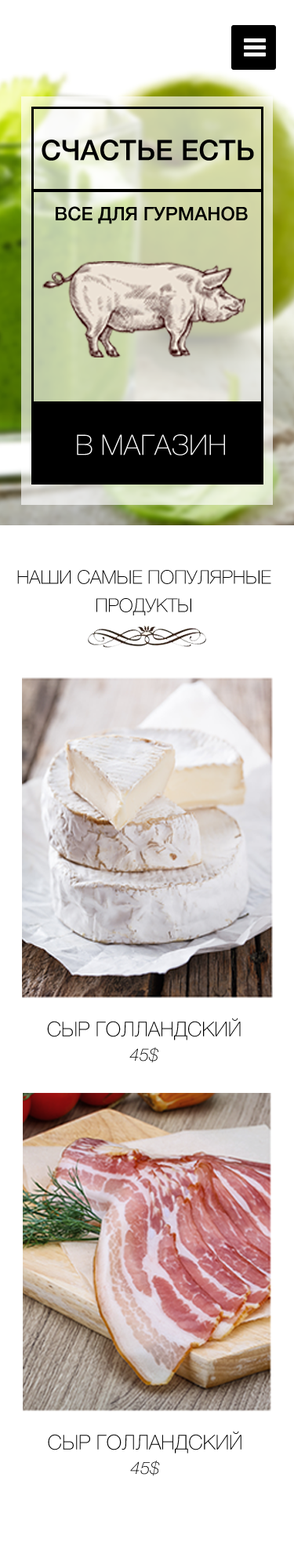
<style>
.page{position:relative;width:294px;height:1568px;background:#ffffff}
.page>*{position:absolute;margin:0}
.t1{font:28.2px "HelveticaNeueCyr-Medium";color:#000000;text-transform:uppercase}
.t2{font:18.8px "HelveticaNeueCyr-Medium";color:#000000;text-transform:uppercase}
.t3{font:28.2px "HelveticaNeueCyr-Thin";color:#f7f7f7;text-transform:uppercase}
.t4{font:18.8px/28.2px "HelveticaNeueCyr-Thin";color:#000000;text-transform:uppercase}
.t5{font:20.4px/24.5px "HelveticaNeueCyr-Thin";color:#000000;text-transform:uppercase}
.t6{font:17.4px/24.5px "HelveticaNeueCyr-ThinItalic";color:#000000;text-transform:uppercase}
.t7{font:17.3px/24.5px "HelveticaNeueCyr-ThinItalic";color:#000000;text-transform:uppercase}
</style>
<div class="page">
<p class="t1" style="left:42px;top:140px;width:212px;height:21px">счастье есть</p>
<p class="t2" style="left:56px;top:206px;width:192px;height:18px">все для гурманов</p>
<p class="t3" style="left:77px;top:434px;width:148px;height:22px">В магазин</p>
<p class="t4" style="left:17px;top:570px;width:254px;height:45px;text-align:center">Наши самые популярные продукты</p>
<p class="t5" style="left:47px;top:1018px;width:194px;height:45px;text-align:center">сыр голландский <span class="t6">45$</span></p>
<p class="t5" style="left:48px;top:1431px;width:193px;height:45px;text-align:center">сыр голландский <span class="t7">45$</span></p>
</div>
